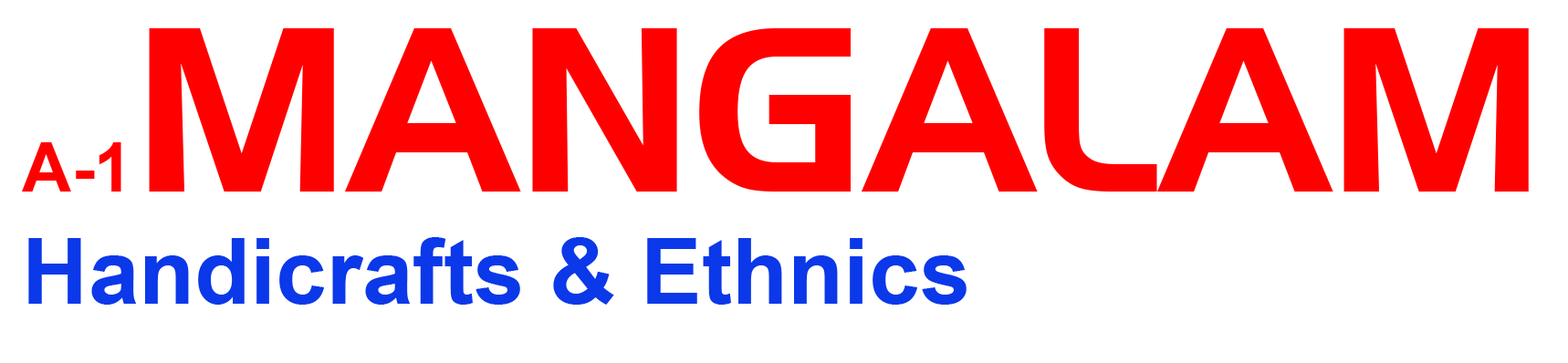
<style>
.page{position:relative;width:1568px;height:363px;background:#ffffff}
.page>*{position:absolute;margin:0}
.t1{font:228.2px "HandelGothicBT-Regular";color:#ff0000}
.t2{font:68.5px "Arial-BoldMT";color:#ff0000}
.t3{font:91.3px "Arial-BoldMT";color:#0b38e9}
</style>
<div class="page">
<p class="t1" style="left:22px;top:28px;width:1507px;height:164px"><span class="t2">A-1</span>MANGALAM</p>
<p class="t3" style="left:28px;top:237px;width:939px;height:68px">Handicrafts &amp; Ethnics</p>
</div>
